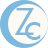
<style>
.page{position:relative;width:48px;height:48px;background:#fcfaf2}
.page>*{position:absolute;margin:0}
.t1{font:34.9px "FuturaStd-Book";color:#7db9de}
.t2{font:38px "FuturaLT-Book";color:#7db9de}
</style>
<div class="page">
<p class="t1" style="left:14px;top:8px;width:20px;height:27px">Z</p>
<p class="t2" style="left:25px;top:22px;width:16px;height:18px">c</p>
</div>
